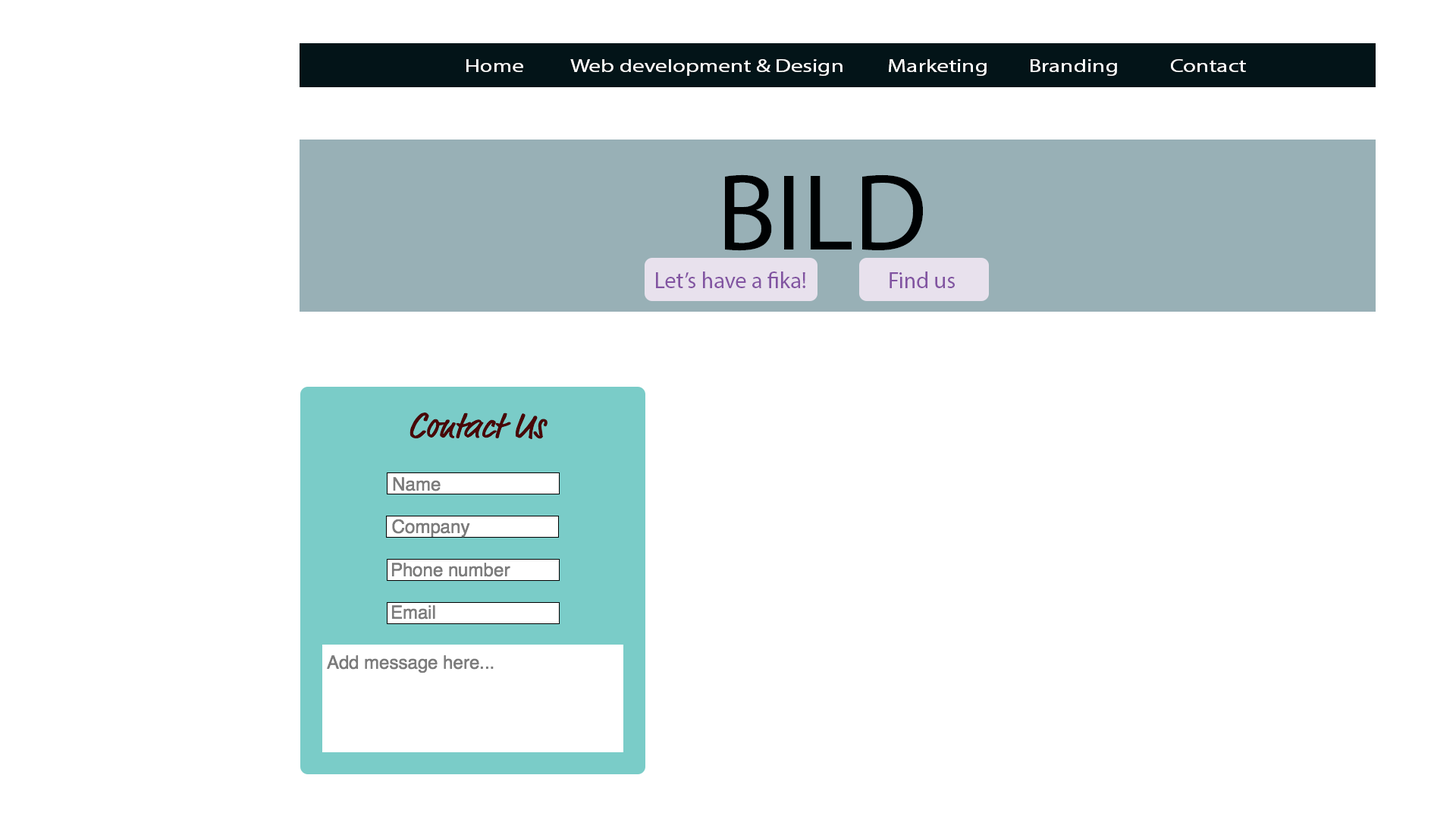
<style>
.page{position:relative;width:1456px;height:819px;background:#ffffff}
.page>*{position:absolute;margin:0}
.t1{font:18.2px "MyriadPro-Regular";color:#ffffff;scale:1.29 1}
.t2{font:109.2px "MyriadPro-Regular";color:#000203}
.t3{font:22.7px "MyriadPro-Regular";color:#8254a2}
.t4{font:36.4px "MarketOT";color:#490707}
.t5{font:18.2px "Helvetica";color:#7c7c7c}
</style>
<div class="page">
<p class="t1" style="left:466px;top:59px;width:780px;height:17px">Home    Web development &amp; Design  Marketing   Branding  Contact</p>
<p class="t2" style="left:725px;top:174px;width:198px;height:77px">BILD</p>
<p class="t3" style="left:656px;top:271px;width:149px;height:17px">Let’s have a fika!</p>
<p class="t3" style="left:890px;top:271px;width:65px;height:17px">Find us</p>
<p class="t4" style="left:409px;top:413px;width:139px;height:26px">Contact Us</p>
<p class="t5" style="left:393px;top:477px;width:48px;height:14px">Name</p>
<p class="t5" style="left:392px;top:519px;width:78px;height:19px">Company</p>
<p class="t5" style="left:391px;top:563px;width:119px;height:14px">Phone number</p>
<p class="t5" style="left:391px;top:605px;width:44px;height:15px">Email</p>
<p class="t5" style="left:327px;top:655px;width:167px;height:18px">Add message here...</p>
</div>
